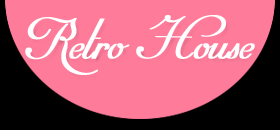
<style>
.page{position:relative;width:280px;height:130px;background:#fe7b9a}
.page>*{position:absolute;margin:0}
.t1{font:54px "MirellaScriptLimitedFreeVersion.vfb";color:#ffffff;font-weight:bold}
</style>
<div class="page">
<p class="t1" style="left:25px;top:15px;width:230px;height:60px">Retro House</p>
</div>
